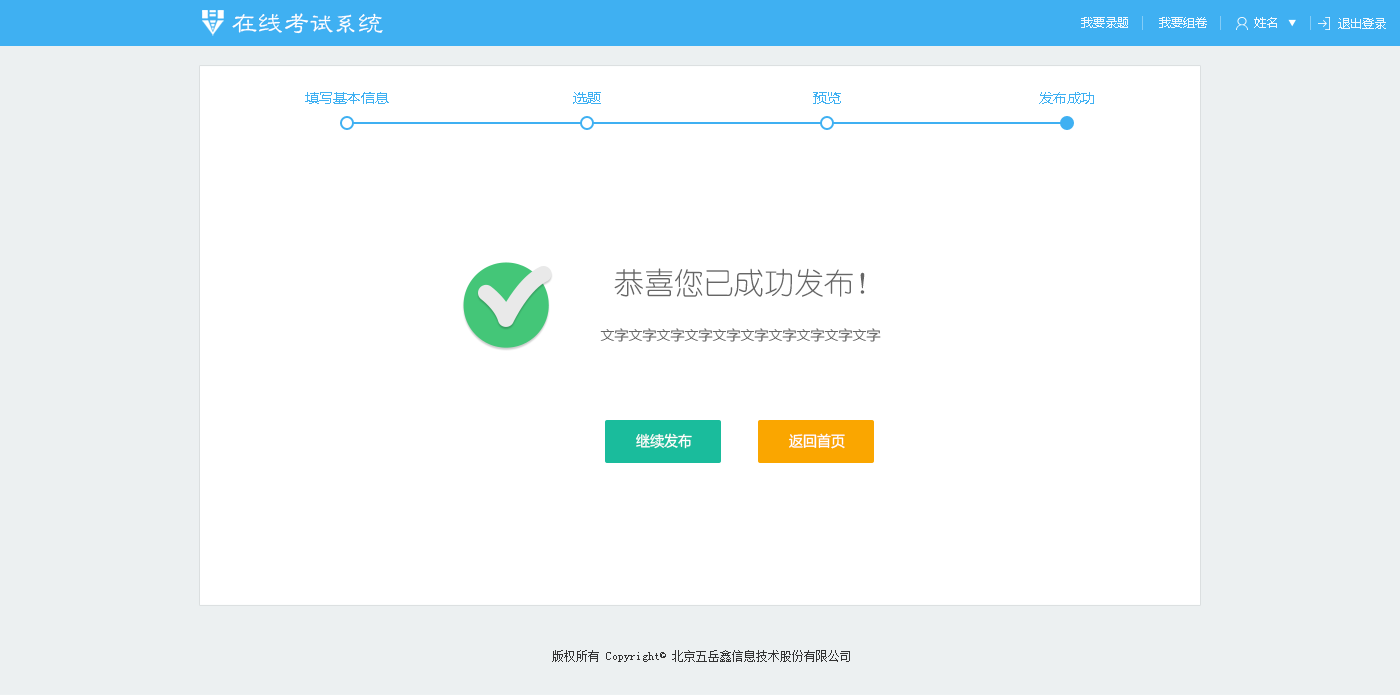
<style>
.page{position:relative;width:1400px;height:698px;background:#ffffff}
.page>*{position:absolute;margin:0}
.t1{font:26px "GBJenLei-Medium";color:#ffffff}
.t2{font:24px "GBJenLei-Medium";color:#ffffff}
.t3{font:12px "MicrosoftYaHei";color:#ffffff}
.t4{font:14px "MicrosoftYaHei";color:#3fb0f2}
.t5{font:30px "YouYuan";color:#666666}
.t6{font:14px "MicrosoftYaHei";color:#666666}
.t7{font:14.4px "MicrosoftYaHei";color:#ffffff}
.t8{font:12px "NSimSun";color:#333333}
</style>
<div class="page">
<p class="t1" style="left:232px;top:13px;width:151px;height:21px">在线考<span class="t2">试系</span>统</p>
<p class="t3" style="left:1081px;top:17px;width:47px;height:11px;opacity:0.9">我要录题</p>
<p class="t3" style="left:1159px;top:17px;width:48px;height:11px;opacity:0.9">我要组卷</p>
<p class="t3" style="left:1254px;top:17px;width:23px;height:11px;opacity:0.9">姓名</p>
<p class="t3" style="left:1338px;top:18px;width:48px;height:11px;opacity:0.9">退出登录</p>
<p class="t4" style="left:305px;top:92px;width:84px;height:12px">填写基本信息</p>
<p class="t4" style="left:573px;top:92px;width:28px;height:12px">选题</p>
<p class="t4" style="left:813px;top:92px;width:28px;height:12px">预览</p>
<p class="t4" style="left:1039px;top:92px;width:55px;height:12px">发布成功</p>
<p class="t5" style="left:614px;top:268px;width:251px;height:29px">恭喜您已成功发布！</p>
<p class="t6" style="left:600px;top:328px;width:281px;height:14px">文字文字文字文字文字文字文字文字文字文字</p>
<p class="t7" style="left:636px;top:433px;width:56px;height:16px">继续发布</p>
<p class="t7" style="left:789px;top:433px;width:56px;height:16px">返回首页</p>
<p class="t8" style="left:552px;top:650px;width:298px;height:12px">版权所有 Copyright© 北京五岳鑫信息技术股份有限公司</p>
</div>
